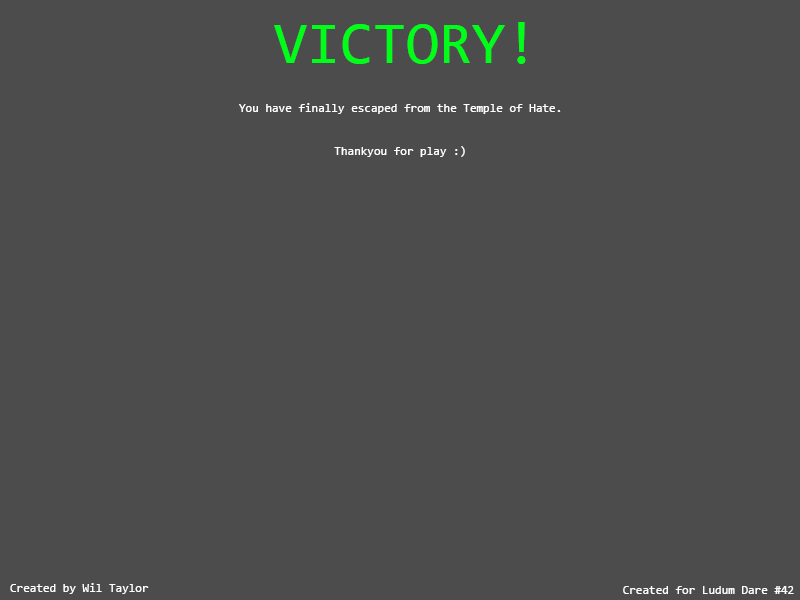
<style>
.page{position:relative;width:800px;height:600px;background:#4c4c4c}
.page>*{position:absolute;margin:0}
.t1{font:60px "Consolas";color:#00ff18}
.t2{font:12px "Consolas";color:#ffffff}
</style>
<div class="page">
<p class="t1" style="left:274px;top:22px;width:252px;height:42px">VICTORY!</p>
<p class="t2" style="left:239px;top:103px;width:322px;height:11px">You have finally escaped from the Temple of Hate.</p>
<p class="t2" style="left:334px;top:146px;width:131px;height:11px">Thankyou for play :)</p>
<p class="t2" style="left:10px;top:583px;width:139px;height:11px">Created by Wil Taylor</p>
<p class="t2" style="left:623px;top:586px;width:171px;height:8px">Created for Ludum Dare #42</p>
</div>
